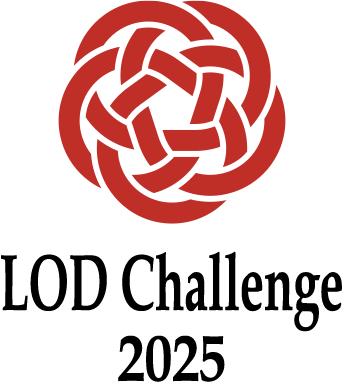
<style>
.page{position:relative;width:344px;height:385px;background:#ffffff}
.page>*{position:absolute;margin:0}
.t1{font:80px "BookAntiqua-Bold";color:#000000;scale:0.6 1}
.t2{font:65px "BookAntiqua-Bold";color:#000000;scale:0.84 1}
</style>
<div class="page">
<p class="t1" style="left:1px;top:251px;width:341px;height:81px">LOD Challenge</p>
<p class="t2" style="left:118px;top:335px;width:107px;height:47px">2025</p>
</div>
